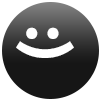
<style>
.page{position:relative;width:100px;height:100px;background:#ffffff}
.page>*{position:absolute;margin:0}
.t1{font:60.1px "Ubuntu-Bold";color:#ffffff}
</style>
<div class="page">
<p class="t1" style="left:16px;top:27px;width:58px;height:31px;rotate:90deg">:)</p>
</div>
